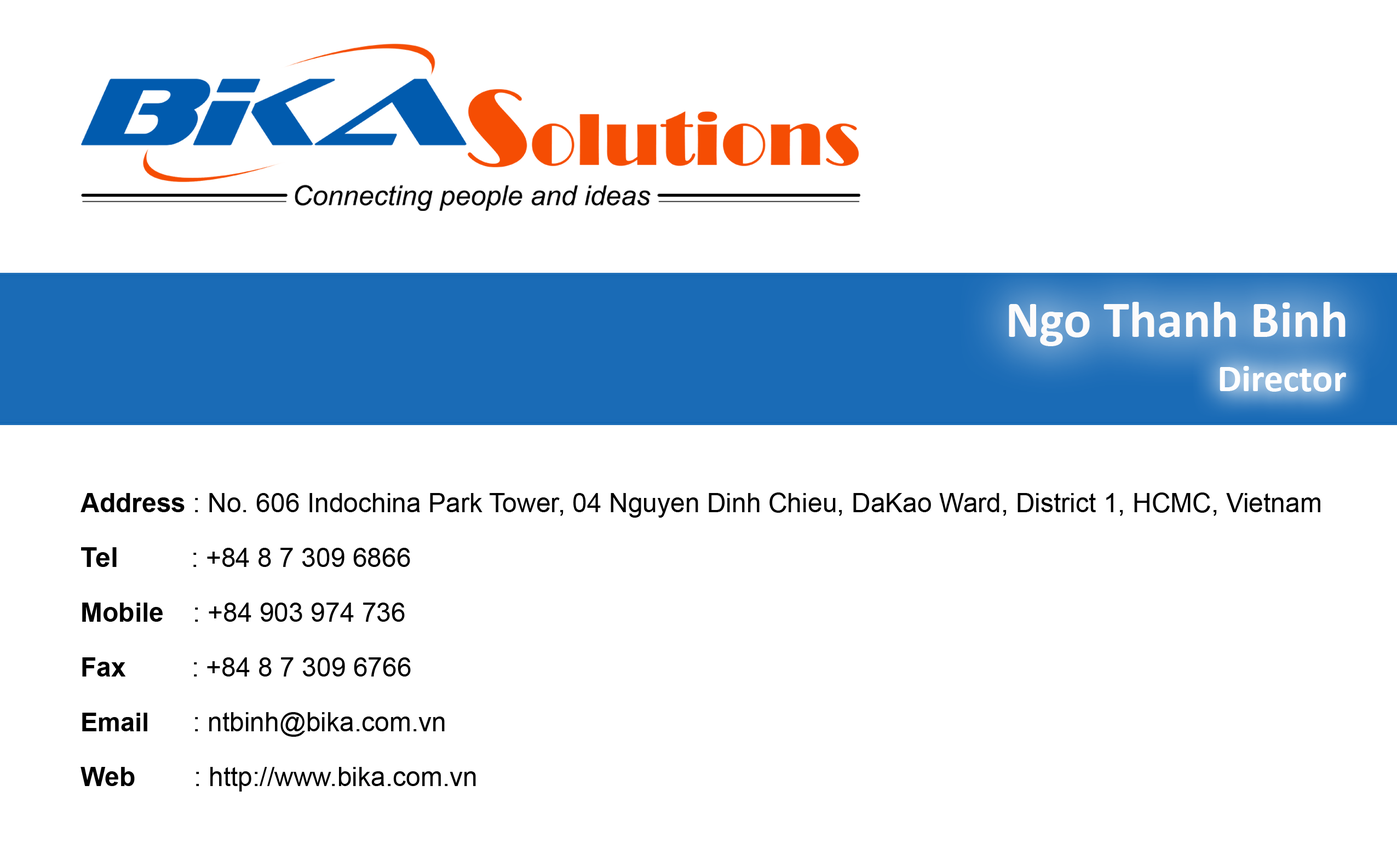
<style>
.page{position:relative;width:1397px;height:854px;background:#ffffff}
.page>*{position:absolute;margin:0}
.t1{font:52px "Calibri-Bold";color:#fdfbfb}
.t2{font:38.3px "Calibri-Bold";color:#ffffff}
.t3{font:26.3px "ArialMT";color:#000000}
.t4{font:26.3px "Arial-BoldMT";color:#000000}
.t5{font:27.4px "Arial-BoldMT";color:#000000}
.t6{font:25.7px "Arial-BoldMT";color:#000000}
</style>
<div class="page">
<p class="t1" style="left:1009px;top:302px;width:336px;height:44px">Ngo Thanh Binh</p>
<p class="t2" style="left:1219px;top:366px;width:127px;height:26px">Director</p>
<p class="t3" style="left:80px;top:492px;width:1240px;height:25px"><span class="t4">Address</span> : No. 606 Indochina Park Tower, 04 Nguyen Dinh Chieu, DaKao Ward, District 1, HCMC, Vietnam</p>
<p class="t3" style="left:81px;top:547px;width:329px;height:20px"><span class="t5">Tel </span>         : +84 8 7 309 6866</p>
<p class="t3" style="left:82px;top:602px;width:323px;height:19px"><span class="t4">Mobile   </span> : +84 903 974 736</p>
<p class="t3" style="left:82px;top:657px;width:329px;height:19px"><span class="t4">Fax       </span>  : +84 8 7 309 6766</p>
<p class="t3" style="left:82px;top:712px;width:363px;height:24px"><span class="t6">Email      </span>: ntbinh@bika.com.vn</p>
<p class="t3" style="left:80px;top:767px;width:396px;height:24px"><span class="t4">Web      </span>  : http://www.bika.com.vn</p>
</div>
